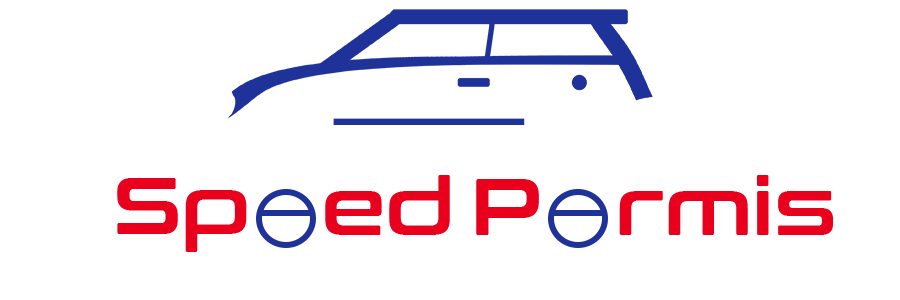
<style>
.page{position:relative;width:900px;height:300px;background:#ffffff}
.page>*{position:absolute;margin:0}
.t1{font:80px "ConthraxSb-Regular";color:#e8001c}
</style>
<div class="page">
<p class="t1" style="left:117px;top:178px;width:130px;height:74px">Sp</p>
<p class="t1" style="left:325px;top:175px;width:125px;height:60px">ed</p>
<p class="t1" style="left:476px;top:179px;width:63px;height:56px">P</p>
<p class="t1" style="left:619px;top:175px;width:214px;height:60px">rmis</p>
</div>
